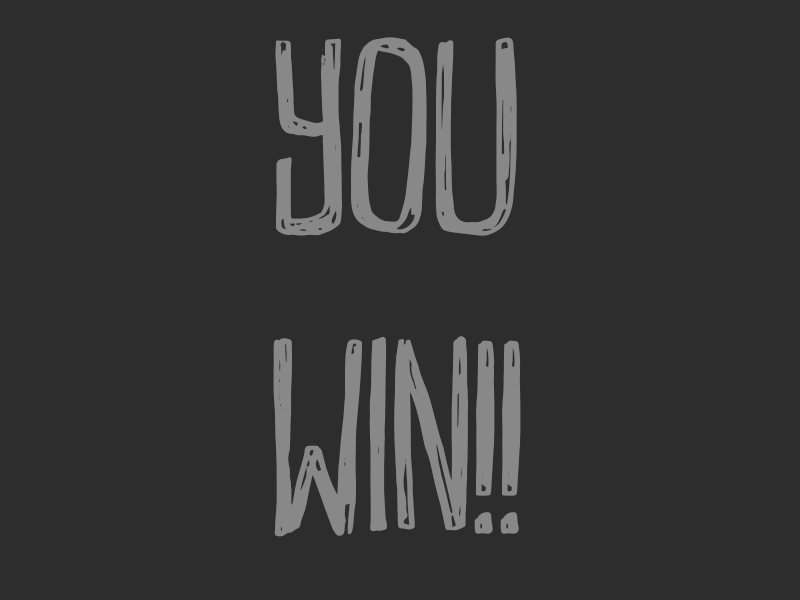
<style>
.page{position:relative;width:800px;height:600px;background:#2d2d2d}
.page>*{position:absolute;margin:0}
.t1{font:250px "DummkopfDEMO-Regular";color:#888888}
</style>
<div class="page">
<p class="t1" style="left:273px;top:37px;width:248px;height:500px;text-align:center">You<br>win!!</p>
</div>
